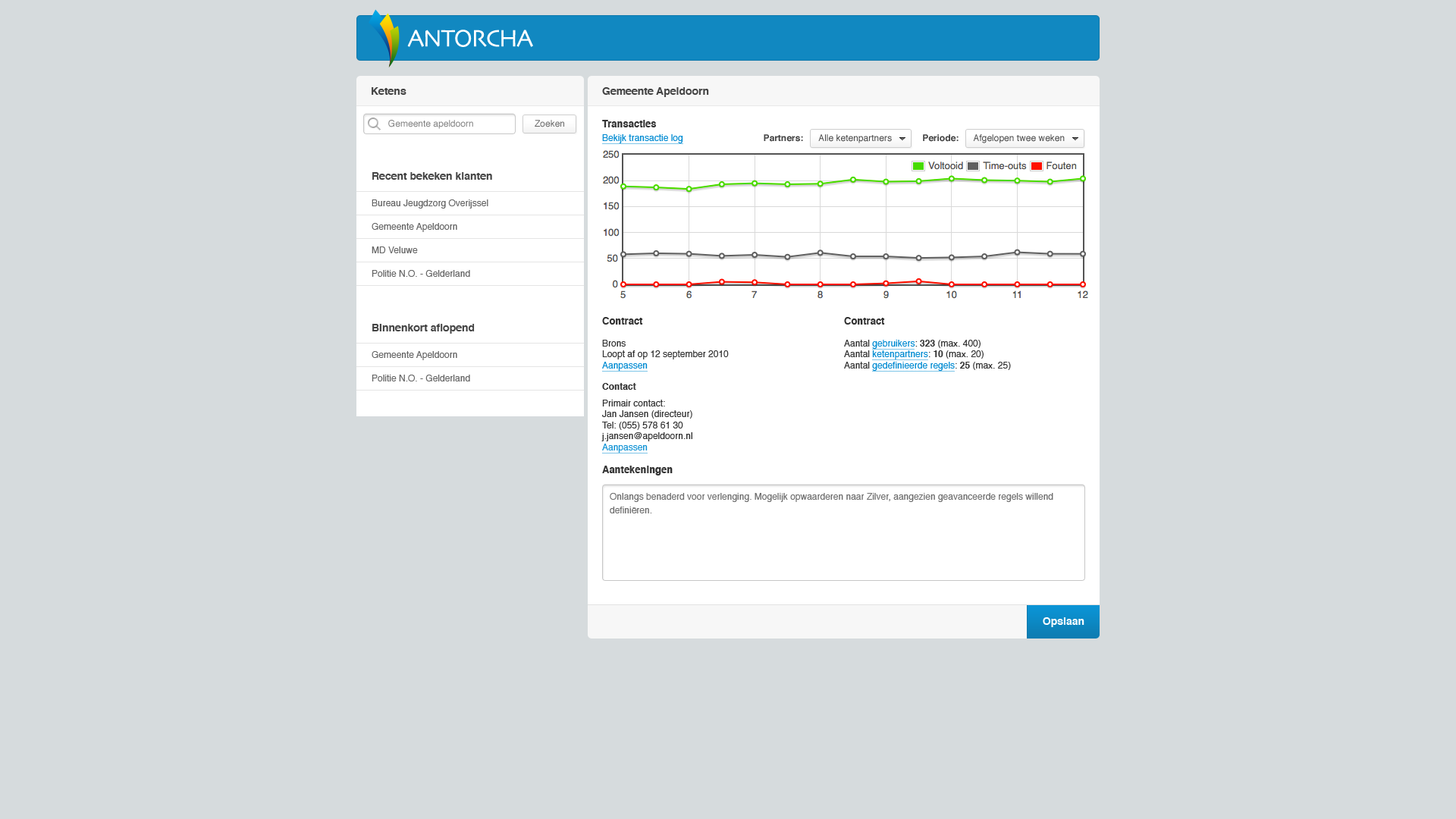
<style>
.page{position:relative;width:1456px;height:819px;background:#d6dbdd}
.page>*{position:absolute;margin:0}
.t1{font:24.7px "Skia-Regular";letter-spacing:-0.05em;color:#ffffff}
.t2{font:10.6px "Helvetica-Bold";color:#444444}
.t3{font:9.1px "Helvetica";color:#7f7f7f}
.t4{font:9.1px "Helvetica";color:#666666}
.t5{font:9.1px/13.6px "Helvetica";color:#008bd2}
.t6{font:9.9px/13.6px "Helvetica-Bold";color:#333333}
.t7{font:9.1px "Helvetica-Bold";color:#444444}
.t8{font:9.1px "Helvetica";color:#444444}
.t9{font:9.1px "Helvetica";color:#333333}
.t10{font:9.9px "Helvetica-Bold";color:#333333}
.t11{font:9.1px "Helvetica";color:#008bd2}
.t12{font:9.1px "Helvetica-Bold";color:#333333}
.t13{font:9.1px "Helvetica";color:#1193d5}
.t14{font:9.1px/13.6px "Helvetica";color:#707070}
.t15{font:10.6px "Helvetica-Bold";color:#ffffff}
</style>
<div class="page">
<p class="t1" style="left:407px;top:30px;width:126px;height:17px">ANTORCHA</p>
<p class="t2" style="left:372px;top:87px;width:34px;height:8px">Ketens</p>
<p class="t2" style="left:602px;top:87px;width:107px;height:10px">Gemeente Apeldoorn</p>
<p class="t3" style="left:388px;top:120px;width:85px;height:9px">Gemeente apeldoorn</p>
<p class="t4" style="left:535px;top:120px;width:29px;height:7px">Zoeken</p>
<p class="t5" style="left:602px;top:120px;width:81px;height:23px"><span class="t6">Transacties<br></span>Bekijk transactie log</p>
<p class="t7" style="left:764px;top:134px;width:39px;height:8px">Partners:</p>
<p class="t8" style="left:818px;top:134px;width:74px;height:9px">Alle ketenpartners</p>
<p class="t7" style="left:923px;top:134px;width:36px;height:8px">Periode:</p>
<p class="t8" style="left:973px;top:134px;width:92px;height:9px">Afgelopen twee weken</p>
<p class="t2" style="left:372px;top:172px;width:120px;height:8px">Recent bekeken klanten</p>
<p class="t4" style="left:372px;top:199px;width:116px;height:10px">Bureau Jeugdzorg Overijssel</p>
<p class="t4" style="left:372px;top:223px;width:85px;height:9px">Gemeente Apeldoorn</p>
<p class="t4" style="left:372px;top:246px;width:46px;height:7px">MD Veluwe</p>
<p class="t4" style="left:372px;top:270px;width:98px;height:7px">Politie N.O. - Gelderland</p>
<p class="t9" style="left:601px;top:317px;width:128px;height:158px"><span class="t10">Contract<br></span><br>Brons<br>Loopt af op 12 september 2010<br><span class="t11">Aanpassen<br><br></span><span class="t12">Contact<br><br></span>Primair contact:<br>Jan Jansen (directeur)<br>Tel: (055) 578 61 30<br>j.jansen@apeldoorn.nl<br><span class="t13">Aanpassen<br><br></span><span class="t10">Aantekeningen</span></p>
<p class="t11" style="left:844px;top:317px;width:167px;height:54px"><span class="t10">Contract<br></span><span class="t9"><br>Aantal </span>gebruikers<span class="t9">: </span><span class="t12">323 </span><span class="t9">(max. 400)<br>Aantal </span>ketenpartners<span class="t9">: </span><span class="t12">10 </span><span class="t9">(max. 20)<br>Aantal </span>gedefinieerde regels<span class="t9">: </span><span class="t12">25 </span><span class="t9">(max. 25)</span></p>
<p class="t2" style="left:372px;top:324px;width:103px;height:10px">Binnenkort aflopend</p>
<p class="t4" style="left:372px;top:351px;width:85px;height:9px">Gemeente Apeldoorn</p>
<p class="t4" style="left:372px;top:375px;width:98px;height:6px">Politie N.O. - Gelderland</p>
<p class="t14" style="left:610px;top:493px;width:443px;height:20px">Onlangs benaderd voor verlenging. Mogelijk opwaarderen naar Zilver, aangezien geavanceerde regels willend <br>definiëren.</p>
<p class="t15" style="left:1043px;top:617px;width:41px;height:10px">Opslaan</p>
</div>
